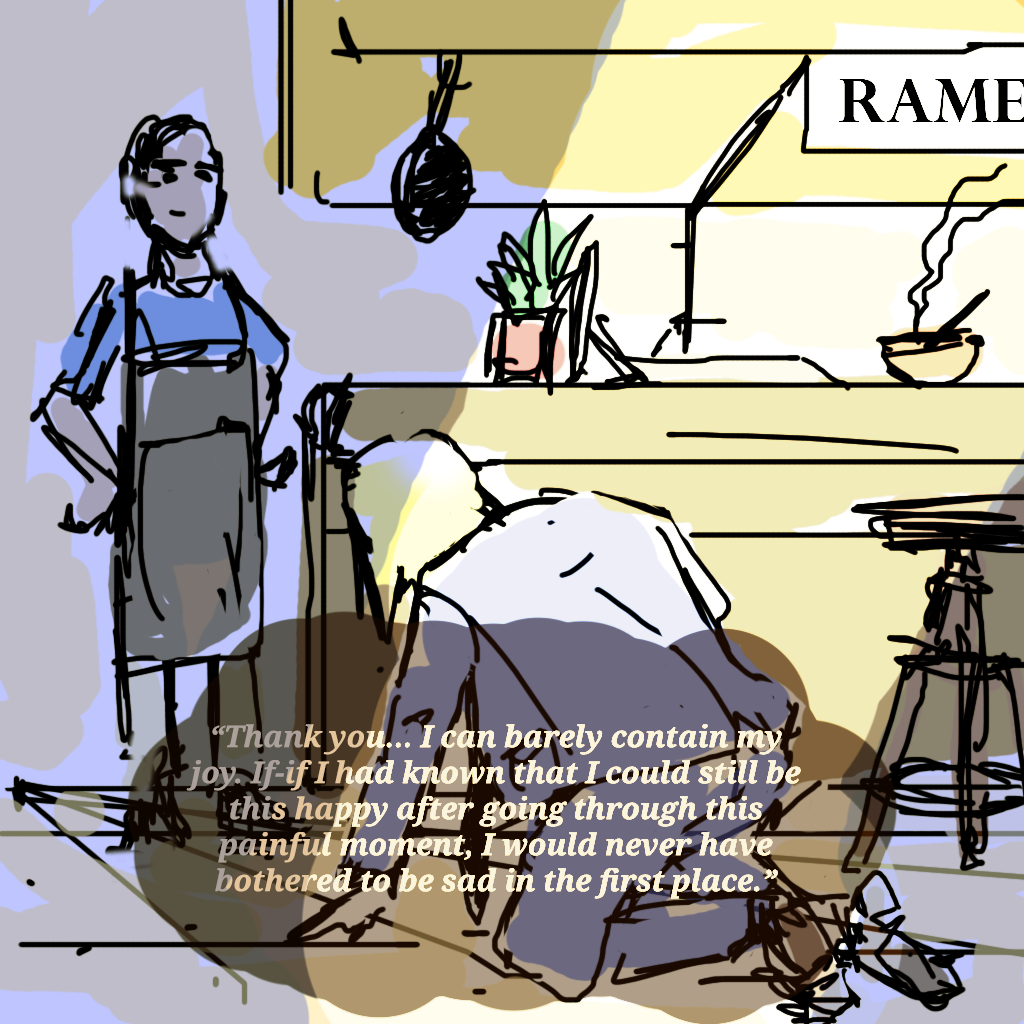
<style>
.page{position:relative;width:1024px;height:1024px}
.page>*{position:absolute;margin:0}
.t1{font:60px "PerpetuaTitlingMT-Bold";color:#000000}
.t2{font:30px "NotoSerif-BoldItalic";color:#fbf5de}
</style>
<div class="page">
<p class="t1" style="left:838px;top:79px;width:188px;height:43px">ramen s hop</p>
<p class="t2" style="left:186px;top:724px;width:615px;height:175px;text-align:center">“Thank you… I can barely contain my joy. If-if I had known that I could still be this happy after going through this painful moment, I would never have bothered to be sad in the first place.”</p>
</div>
